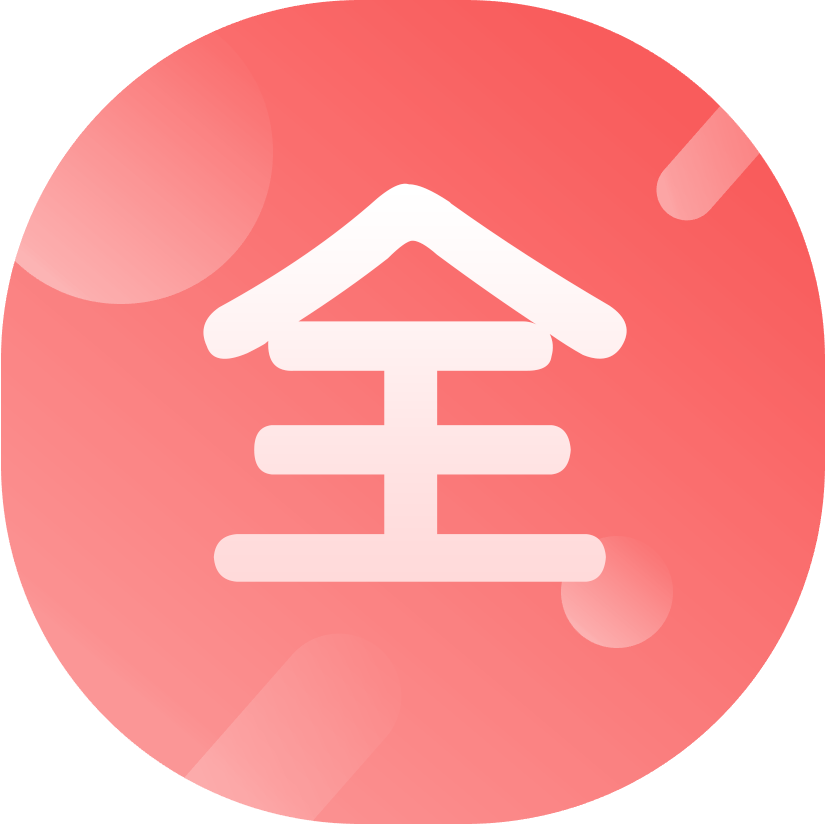
<style>
.page{position:relative;width:826px;height:824px}
.page>*{position:absolute;margin:0}
.t1{font:450px "FZY4JW--GB1-0";color:#ffeeee}
</style>
<div class="page">
<p class="t1" style="left:203px;top:183px;width:424px;height:399px">全</p>
</div>
